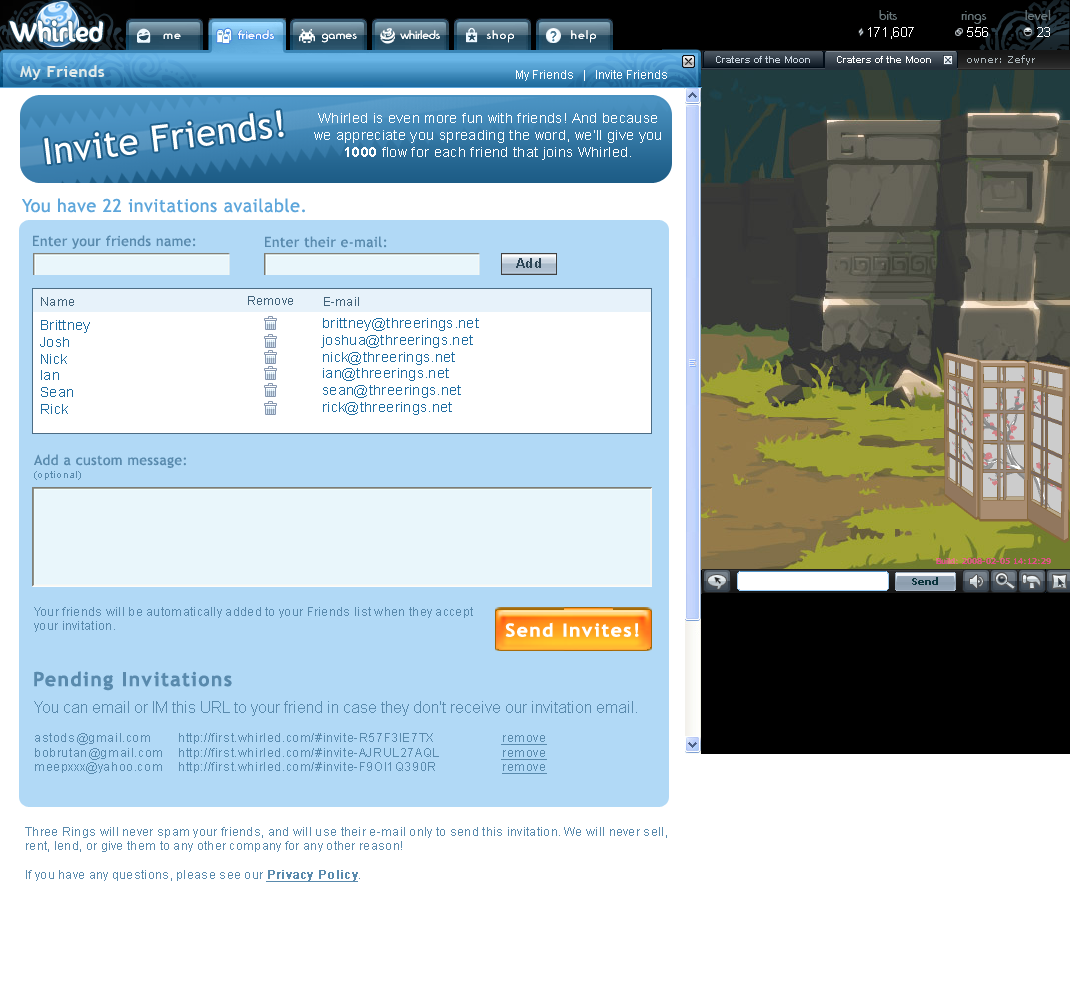
<style>
.page{position:relative;width:1070px;height:1000px;background:#ffffff}
.page>*{position:absolute;margin:0}
.t1{font:14px "ArialMT";letter-spacing:0.025em;color:#ffffff}
.t2{font:14px "Arial-BoldMT";letter-spacing:0.025em;color:#ffffff}
.t3{font:18px "TrebuchetMS";letter-spacing:0.025em;color:#5da6db}
.t4{font:14px "TrebuchetMS";letter-spacing:0.025em;color:#598aad}
.t5{font:13px "Arial-BoldMT";letter-spacing:0.075em;color:#2c4455}
.t6{font:12px "ArialMT";letter-spacing:0.025em;color:#426279}
.t7{font:14px "ArialMT";letter-spacing:0.025em;color:#1e6ca1}
.t8{font:10px "ArialMT";letter-spacing:0.025em;color:#598aad}
.t9{font:12px "ArialMT";letter-spacing:0.025em;color:#598aad}
.t10{font:18px "TrebuchetMS-Bold";letter-spacing:0.05em;color:#ffffff;font-weight:bold;scale:1.07 1}
.t11{font:19.3px "TrebuchetMS-Bold";letter-spacing:0.05em;color:#598aad;font-weight:bold}
.t12{font:16px "ArialMT";color:#598aad}
.t13{font:12px "ArialMT";letter-spacing:0.05em;color:#598aad}
.t14{font:12px "ArialMT";letter-spacing:0.05em;color:#598aad;text-decoration:underline}
.t15{font:12px "ArialMT";letter-spacing:0.025em;color:#598aad;font-weight:bold;text-decoration:underline}
</style>
<div class="page">
<p class="t1" style="left:314px;top:113px;width:347px;height:47px;text-align:center">Whirled is even more fun with friends! And because we appreciate you spreading the word, we’ll give you <span class="t2">1000</span> flow for each friend that joins Whirled.</p>
<p class="t3" style="left:22px;top:198px;width:283px;height:15px">You have 22 invitations available.</p>
<p class="t4" style="left:33px;top:235px;width:163px;height:14px">Enter your friends name:</p>
<p class="t4" style="left:265px;top:236px;width:122px;height:12px">Enter their e-mail:</p>
<p class="t5" style="left:516px;top:258px;width:25px;height:10px">Add</p>
<p class="t6" style="left:41px;top:297px;width:33px;height:9px">Name</p>
<p class="t6" style="left:248px;top:296px;width:45px;height:9px">Remove</p>
<p class="t6" style="left:324px;top:297px;width:35px;height:9px">E-mail</p>
<p class="t7" style="left:321px;top:318px;width:158px;height:97px">brittney@threerings.net<br>joshua@threerings.net<br>nick@threerings.net<br>ian@threerings.net<br>sean@threerings.net<br>rick@threerings.net</p>
<p class="t7" style="left:40px;top:320px;width:50px;height:94px">Brittney<br>Josh<br>Nick<br>Ian<br>Sean<br>Rick</p>
<p class="t4" style="left:34px;top:454px;width:152px;height:14px">Add a custom message:</p>
<p class="t8" style="left:34px;top:471px;width:47px;height:9px">(optional)</p>
<p class="t9" style="left:34px;top:607px;width:439px;height:25px">Your friends will be automatically added to your Friends list when they accept<br>your invitation.</p>
<p class="t10" style="left:505px;top:622px;width:134px;height:15px">Send Invites!</p>
<p class="t11" style="left:34px;top:671px;width:198px;height:20px">Pending Invitations</p>
<p class="t12" style="left:34px;top:701px;width:603px;height:73px">You can email or IM this URL to your friend in case they don't receive our invitation email.<br><span class="t13"><br>astods@gmail.com http://first.whirled.com/#invite-R57F3IE7TX  </span><span class="t14">remove<br></span><span class="t13">bobrutan@gmail.com http://first.whirled.com/#invite-AJRUL27AQL  </span><span class="t14">remove<br></span><span class="t13">meepxxx@yahoo.com http://first.whirled.com/#invite-F9OI1Q390R  </span><span class="t14">remove</span></p>
<p class="t9" style="left:25px;top:827px;width:642px;height:55px">Three Rings will never spam your friends, and will use their e-mail only to send this invitation. We will never sell,<br>rent, lend, or give them to any other company for any other reason! <br><br>If you have any questions, please see our <span class="t15">Privacy Policy</span>.</p>
</div>
